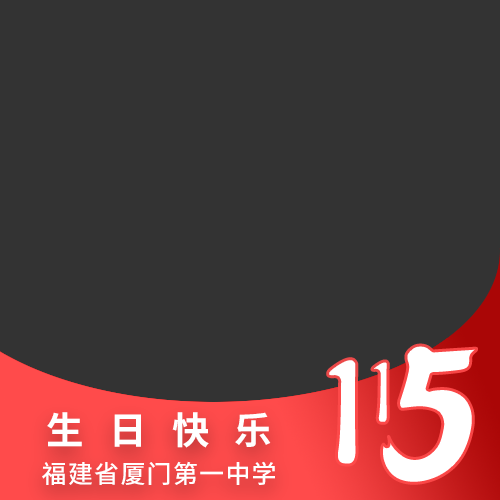
<style>
.page{position:relative;width:500px;height:500px;background:#333333}
.page>*{position:absolute;margin:0}
.t1{font:209.8px "FZZJ-ZWBSTJF--GBK1-0";letter-spacing:0.05em;color:#ffffff}
.t2{font:165.7px "JIMOJW";letter-spacing:0.05em;color:#ffffff}
.t3{font:99.4px "JIMOJW";letter-spacing:0.05em}
.t4{font:37.5px/50px "Sarasa-Gothic-SC-Bold";letter-spacing:0.05em;color:#ffffff}
.t5{font:25px/50px "Sarasa-Gothic-SC-Semibold";letter-spacing:0.05em;color:#ffffff}
</style>
<div class="page">
<p class="t1" style="left:380px;top:343px;width:98px;height:142px">5</p>
<p class="t2" style="left:326px;top:357px;width:33px;height:110px">1</p>
<p class="t3" style="left:370px;top:359px;width:20px;height:66px">1</p>
<p class="t4" style="left:42px;top:412px;width:233px;height:73px;text-align:center">生  日  快  乐<br><span class="t5">福建省厦门第一中学</span></p>
</div>
